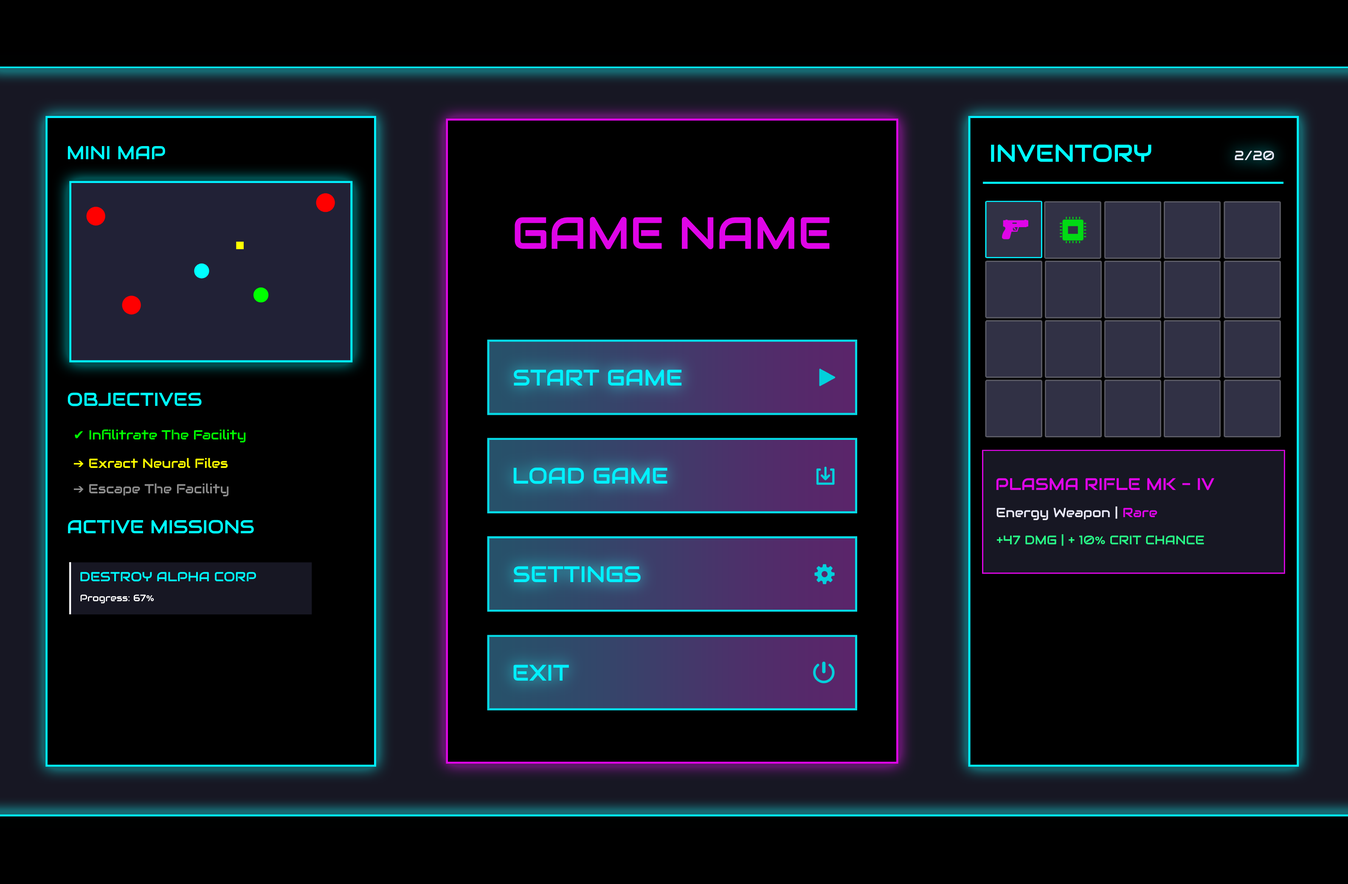
<style>
.page{position:relative;width:1348px;height:884px;background:#000000}
.page>*{position:absolute;margin:0}
.t1{font:18.8px "Audiowide-Regular";color:#00fbff}
.t2{font:24.4px "Audiowide-Regular";color:#00fbff}
.t3{font:13.1px "Audiowide-Regular";color:#ebebfb}
.t4{font:45px "Audiowide-Regular";color:#df05e7}
.t5{font:22.5px "Audiowide-Regular";color:#00fbff}
.t6{font:13.1px "Audiowide-Regular";color:#00ff00}
.t7{font:13.1px "DejaVuSans";color:#00ff00}
.t8{font:13.1px "Audiowide-Regular";color:#ffff00}
.t9{font:13.1px "DejaVuSans";color:#ffff00}
.t10{font:13.1px "Audiowide-Regular";color:#8c8c8c}
.t11{font:13.1px "DejaVuSans";color:#8c8c8c}
.t12{font:16.9px "Audiowide-Regular";color:#df05e7}
.t13{font:13.1px "Audiowide-Regular";color:#df05e7}
.t14{font:12.4px "Audiowide-Regular";color:#29fd87}
.t15{font:13.1px "Audiowide-Regular";color:#00fbff}
.t16{font:9.4px "Audiowide-Regular";color:#ffffff}
</style>
<div class="page">
<p class="t1" style="left:68px;top:146px;width:97px;height:14px">MINI MAP</p>
<p class="t2" style="left:991px;top:144px;width:161px;height:18px">INVENTORY</p>
<p class="t3" style="left:1235px;top:151px;width:40px;height:9px">2/20</p>
<p class="t4" style="left:515px;top:217px;width:315px;height:32px">GAME NAME</p>
<p class="t5" style="left:514px;top:370px;width:168px;height:16px">START GAME</p>
<p class="t1" style="left:68px;top:392px;width:134px;height:14px">OBJECTIVES</p>
<p class="t6" style="left:75px;top:429px;width:171px;height:14px"><span class="t7">✔ </span>Infilitrate The Facility</p>
<p class="t8" style="left:73px;top:458px;width:155px;height:10px"><span class="t9">➔ </span>Exract Neural Files</p>
<p class="t5" style="left:513px;top:468px;width:155px;height:16px">LOAD GAME</p>
<p class="t10" style="left:73px;top:483px;width:156px;height:13px"><span class="t11">➔ </span>Escape The Facility</p>
<p class="t12" style="left:996px;top:478px;width:219px;height:13px">PLASMA RIFLE MK - IV</p>
<p class="t3" style="left:997px;top:506px;width:161px;height:14px">Energy Weapon | <span class="t13">Rare</span></p>
<p class="t1" style="left:68px;top:520px;width:186px;height:14px">ACTIVE MISSIONS</p>
<p class="t14" style="left:997px;top:534px;width:208px;height:12px">+47 DMG | + 10% CRIT CHANCE</p>
<p class="t5" style="left:514px;top:566px;width:127px;height:17px">SETTINGS</p>
<p class="t15" style="left:80px;top:572px;width:176px;height:10px">DESTROY ALPHA CORP</p>
<p class="t16" style="left:80px;top:595px;width:74px;height:9px">Progress: 67%</p>
<p class="t5" style="left:513px;top:665px;width:56px;height:16px">EXIT</p>
</div>
